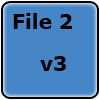
<style>
.page{position:relative;width:100px;height:100px;background:#4686c7}
.page>*{position:absolute;margin:0}
.t1{font:20px "Verdana-Bold";color:#000000}
</style>
<div class="page">
<p class="t1" style="left:13px;top:13px;width:59px;height:16px">File 2</p>
<p class="t1" style="left:40px;top:56px;width:26px;height:15px">v3</p>
</div>
